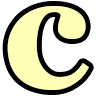
<style>
.page{position:relative;width:96px;height:96px;background:#ffffff}
.page>*{position:absolute;margin:0}
.t1{font:163.7px "Georgia-Bold";color:#ffffb8}
</style>
<div class="page">
<p class="t1" style="left:7px;top:6px;width:82px;height:84px">c</p>
</div>
